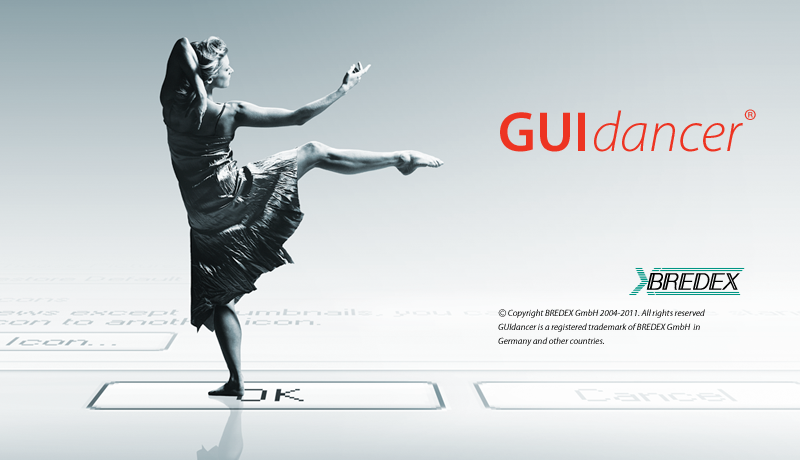
<style>
.page{position:relative;width:800px;height:460px}
.page>*{position:absolute;margin:0}
.t1{font:56.9px "MyriadPro-LightIt";color:#ed3422}
.t2{font:56.9px "MyriadPro-Semibold";color:#ed3422}
.t3{font:9px/14px "MyriadPro-It"}
.t4{font:12px/14px "MyriadPro-It"}
</style>
<div class="page">
<p class="t1" style="left:500px;top:109px;width:256px;height:43px"><span class="t2">GUI</span>dancer®</p>
<p class="t3" style="left:498px;top:309px;width:207px;height:37px"><span class="t4">©</span> Copyright BREDEX GmbH 2004-2011. All rights reserved<br>GUIdancer is a registered trademark of BREDEX GmbH  in<br>Germany and other countries.</p>
</div>
